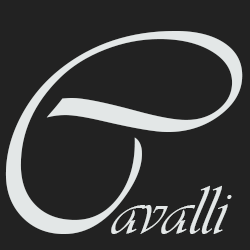
<style>
.page{position:relative;width:250px;height:250px;background:#222222}
.page>*{position:absolute;margin:0}
.t1{font:290px "Vivaldii";color:#fafffe}
.t2{font:72px "Vivaldii";color:#fafffe}
</style>
<div class="page">
<p class="t1" style="left:5px;top:31px;width:238px;height:203px;opacity:0.85">C</p>
<p class="t2" style="left:111px;top:185px;width:121px;height:49px;opacity:0.85">avalli</p>
</div>
